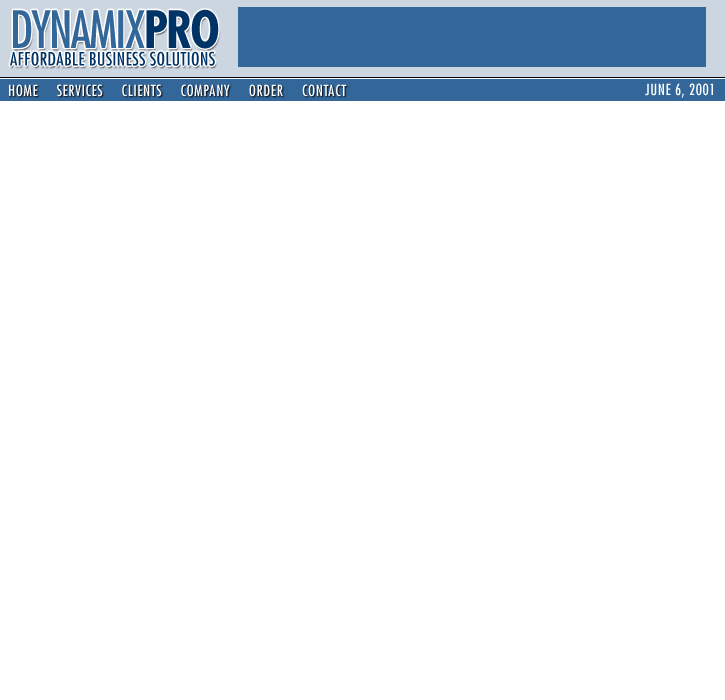
<style>
.page{position:relative;width:725px;height:700px;background:#ffffff}
.page>*{position:absolute;margin:0}
.t1{font:18px/13.5px "Futura-Condensed";letter-spacing:0.02em;color:#003366}
.t2{font:50px/29.5px "Futura-Condensed";letter-spacing:-0.04em;color:#336699}
.t3{font:50px/29.5px "Futura-CondensedBold";letter-spacing:-0.04em;color:#003366}
.t4{font:15px "Futura-Condensed";letter-spacing:0.04em;color:#ffffff}
</style>
<div class="page">
<p class="t1" style="left:10px;top:9px;width:209px;height:57px"><span class="t2">DYNAMIX</span><span class="t3">PRO<br></span>AFFORDABLE BUSINESS SOLUTIONS</p>
<p class="t4" style="left:9px;top:84px;width:338px;height:13px">HOME     SERVICES     CLIENTS     COMPANY     ORDER     CONTACT</p>
<p class="t4" style="left:645px;top:83px;width:68px;height:15px">JUNE 6, 2001</p>
</div>
